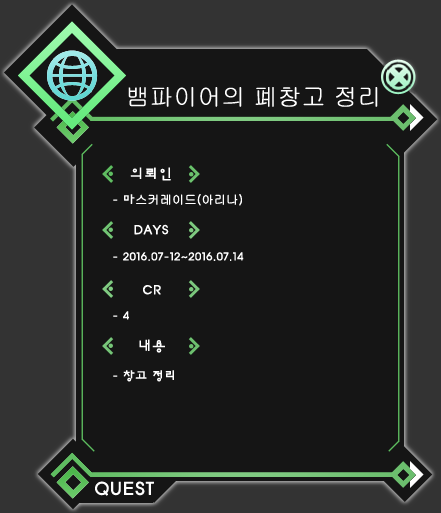
<style>
.page{position:relative;width:441px;height:513px;background:#151515}
.page>*{position:absolute;margin:0}
.t1{font:24px "Gulim";color:#ffffff}
.t2{font:14px "HYnamM";color:#ffffff;font-weight:bold}
.t3{font:12px "Gulim";color:#ffffff;font-weight:bold}
.t4{font:12px "HYnamM";color:#ffffff;font-weight:bold}
.t5{font:20px "HYnamM";color:#ffffff;font-weight:bold}
</style>
<div class="page">
<p class="t1" style="left:128px;top:87px;width:250px;height:20px">뱀파이어의 폐창고 정리</p>
<p class="t2" style="left:130px;top:167px;width:41px;height:14px">의뢰인</p>
<p class="t3" style="left:113px;top:194px;width:129px;height:12px"><span class="t4">- 마</span>스커레이드(아리나)</p>
<p class="t2" style="left:134px;top:224px;width:35px;height:11px">DAYS</p>
<p class="t4" style="left:113px;top:252px;width:131px;height:9px">- 2016.07-12~2016.07.14</p>
<p class="t2" style="left:143px;top:285px;width:18px;height:10px">CR</p>
<p class="t4" style="left:113px;top:311px;width:16px;height:9px">- 4</p>
<p class="t2" style="left:139px;top:339px;width:26px;height:14px">내용</p>
<p class="t4" style="left:113px;top:370px;width:61px;height:12px">- 창고 정리</p>
<p class="t5" style="left:95px;top:481px;width:59px;height:15px">QUEST</p>
</div>
